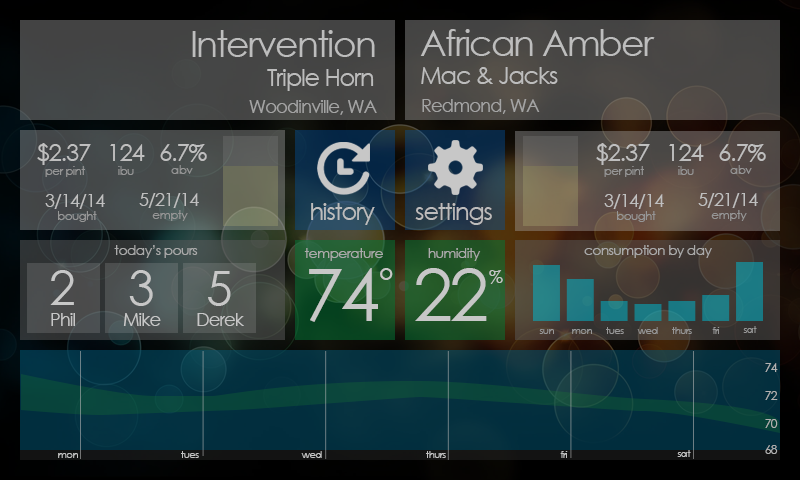
<style>
.page{position:relative;width:800px;height:480px}
.page>*{position:absolute;margin:0}
.t1{font:36px "CenturyGothic";letter-spacing:-0.05em;color:#bdbdbd}
.t2{font:24px "CenturyGothic";letter-spacing:-0.05em;color:#bdbdbd}
.t3{font:18px "CenturyGothic";letter-spacing:-0.05em;color:#a4a4a4}
.t4{font:24px "CenturyGothic";letter-spacing:-0.05em;color:#bfbfbf}
.t5{font:12px "CenturyGothic";letter-spacing:-0.05em;color:#969696}
.t6{font:18px "CenturyGothic";letter-spacing:-0.05em;color:#bfbfbf}
.t7{font:14px "CenturyGothic";letter-spacing:-0.05em;color:#aaaaaa}
.t8{font:14px "CenturyGothic";letter-spacing:-0.05em;color:#ababab}
.t9{font:48px "CenturyGothic";letter-spacing:-0.05em;color:#c7c7c7}
.t10{font:72px "CenturyGothic";letter-spacing:-0.05em;color:#c7c7c7}
.t11{font:36px "CenturyGothic";letter-spacing:-0.05em;color:#c7c7c7}
.t12{font:18px "CenturyGothic";letter-spacing:-0.05em;color:#c7c7c7}
.t13{font:10px "CenturyGothic";letter-spacing:-0.05em;color:#969696}
.t14{font:12px "CenturyGothic";letter-spacing:-0.05em;color:#b1b1b1}
.t15{font:10px "CenturyGothic";letter-spacing:-0.05em;color:#c3c3c3}
</style>
<div class="page">
<p class="t1" style="left:192px;top:30px;width:183px;height:27px">Intervention</p>
<p class="t1" style="left:420px;top:29px;width:235px;height:27px">African Amber</p>
<p class="t2" style="left:267px;top:69px;width:107px;height:22px">Triple Horn</p>
<p class="t2" style="left:421px;top:67px;width:137px;height:17px">Mac &amp; Jacks</p>
<p class="t3" style="left:249px;top:100px;width:128px;height:15px">Woodinville, WA</p>
<p class="t3" style="left:422px;top:99px;width:118px;height:15px">Redmond, WA</p>
<p class="t4" style="left:37px;top:143px;width:54px;height:22px">$2.37</p>
<p class="t4" style="left:110px;top:144px;width:35px;height:17px">124</p>
<p class="t4" style="left:160px;top:144px;width:47px;height:18px">6.7%</p>
<p class="t4" style="left:596px;top:143px;width:54px;height:22px">$2.37</p>
<p class="t4" style="left:669px;top:144px;width:35px;height:17px">124</p>
<p class="t4" style="left:719px;top:144px;width:47px;height:18px">6.7%</p>
<p class="t5" style="left:45px;top:166px;width:40px;height:11px">per pint</p>
<p class="t5" style="left:118px;top:166px;width:16px;height:9px">ibu</p>
<p class="t5" style="left:171px;top:165px;width:22px;height:9px">abv</p>
<p class="t5" style="left:604px;top:166px;width:40px;height:11px">per pint</p>
<p class="t5" style="left:678px;top:166px;width:16px;height:9px">ibu</p>
<p class="t5" style="left:730px;top:165px;width:22px;height:9px">abv</p>
<p class="t6" style="left:45px;top:194px;width:60px;height:15px">3/14/14</p>
<p class="t6" style="left:139px;top:193px;width:60px;height:15px">5/21/14</p>
<p class="t6" style="left:604px;top:194px;width:60px;height:15px">3/14/14</p>
<p class="t6" style="left:698px;top:193px;width:60px;height:15px">5/21/14</p>
<p class="t2" style="left:311px;top:203px;width:64px;height:22px">history</p>
<p class="t2" style="left:415px;top:203px;width:77px;height:22px">settings</p>
<p class="t5" style="left:58px;top:211px;width:39px;height:11px">bought</p>
<p class="t5" style="left:152px;top:210px;width:36px;height:11px">empty</p>
<p class="t5" style="left:617px;top:211px;width:39px;height:11px">bought</p>
<p class="t5" style="left:711px;top:210px;width:36px;height:11px">empty</p>
<p class="t7" style="left:114px;top:245px;width:84px;height:13px">today’s pours</p>
<p class="t7" style="left:584px;top:245px;width:128px;height:13px">consumption by day</p>
<p class="t8" style="left:304px;top:248px;width:79px;height:13px">temperature</p>
<p class="t8" style="left:428px;top:248px;width:53px;height:13px">humidity</p>
<p class="t9" style="left:50px;top:270px;width:24px;height:35px">2</p>
<p class="t9" style="left:129px;top:270px;width:24px;height:36px">3</p>
<p class="t10" style="left:309px;top:268px;width:69px;height:54px">74</p>
<p class="t11" style="left:380px;top:268px;width:13px;height:12px">°</p>
<p class="t10" style="left:415px;top:268px;width:72px;height:53px">22</p>
<p class="t12" style="left:489px;top:270px;width:14px;height:14px">%</p>
<p class="t9" style="left:208px;top:271px;width:23px;height:35px">5</p>
<p class="t12" style="left:51px;top:313px;width:24px;height:13px">Phil</p>
<p class="t12" style="left:123px;top:313px;width:38px;height:13px">Mike</p>
<p class="t12" style="left:197px;top:313px;width:47px;height:13px">Derek</p>
<p class="t13" style="left:539px;top:329px;width:15px;height:5px">sun</p>
<p class="t13" style="left:572px;top:329px;width:20px;height:5px">mon</p>
<p class="t13" style="left:606px;top:327px;width:18px;height:7px">tues</p>
<p class="t13" style="left:637px;top:327px;width:21px;height:7px">wed</p>
<p class="t13" style="left:672px;top:327px;width:20px;height:7px">thurs</p>
<p class="t13" style="left:712px;top:327px;width:8px;height:7px">fri</p>
<p class="t13" style="left:743px;top:326px;width:14px;height:7px">sat</p>
<p class="t14" style="left:765px;top:363px;width:13px;height:9px">74</p>
<p class="t14" style="left:765px;top:391px;width:13px;height:9px">72</p>
<p class="t14" style="left:765px;top:419px;width:13px;height:9px">70</p>
<p class="t14" style="left:765px;top:445px;width:13px;height:9px">68</p>
<p class="t15" style="left:58px;top:453px;width:20px;height:5px">mon</p>
<p class="t15" style="left:181px;top:451px;width:18px;height:7px">tues</p>
<p class="t15" style="left:301px;top:451px;width:21px;height:7px">wed</p>
<p class="t15" style="left:426px;top:451px;width:20px;height:7px">thurs</p>
<p class="t15" style="left:560px;top:451px;width:8px;height:7px">fri</p>
<p class="t15" style="left:677px;top:450px;width:14px;height:7px">sat</p>
</div>
